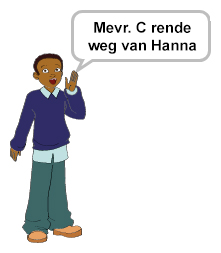
<style>
.page{position:relative;width:221px;height:253px;background:#ffffff}
.page>*{position:absolute;margin:0}
.t1{font:14.9px "Arial-BoldMT";color:#000000}
</style>
<div class="page">
<p class="t1" style="left:88px;top:21px;width:109px;height:33px;text-align:center">Mevr. C rende<br>weg van Hanna</p>
</div>
